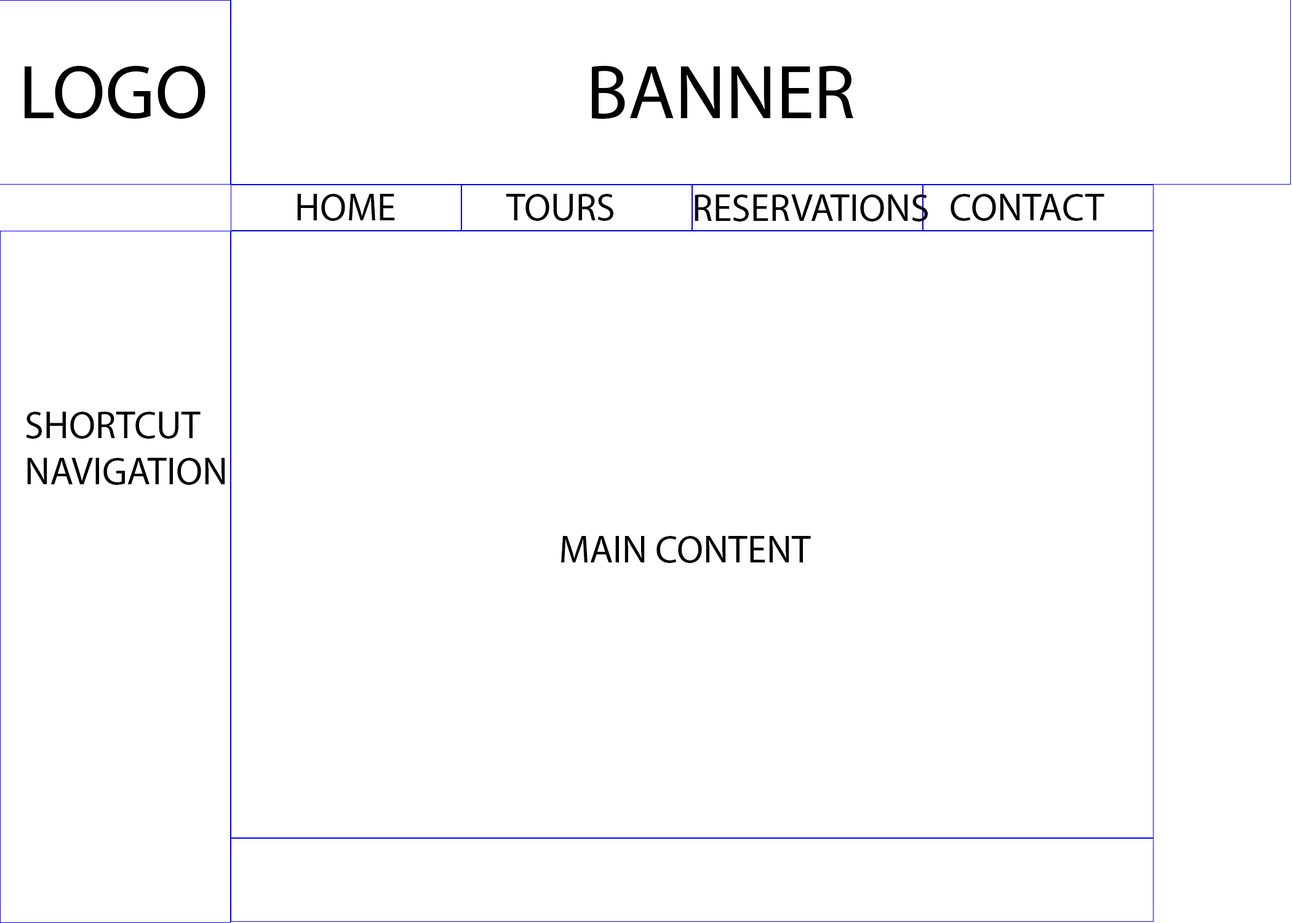
<style>
.page{position:relative;width:1292px;height:923px;background:#ffffff}
.page>*{position:absolute;margin:0}
.t1{font:76.9px "MyriadPro-Regular";color:#000000}
.t2{font:38.5px "MyriadPro-Regular";color:#000000}
</style>
<div class="page">
<p class="t1" style="left:25px;top:65px;width:180px;height:54px">LOGO</p>
<p class="t1" style="left:592px;top:65px;width:261px;height:54px">BANNER</p>
<p class="t2" style="left:297px;top:194px;width:98px;height:27px">HOME</p>
<p class="t2" style="left:506px;top:194px;width:107px;height:27px">TOURS</p>
<p class="t2" style="left:695px;top:194px;width:233px;height:27px">RESERVATIONS</p>
<p class="t2" style="left:951px;top:194px;width:153px;height:27px">CONTACT</p>
<p class="t2" style="left:26px;top:412px;width:199px;height:73px">SHORTCUT<br>NAVIGATION</p>
<p class="t2" style="left:561px;top:536px;width:250px;height:27px">MAIN CONTENT</p>
</div>
